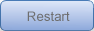
<style>
.page{position:relative;width:94px;height:31px}
.page>*{position:absolute;margin:0}
.t1{font:13.3px "ArialMT";color:#6e6e6e}
</style>
<div class="page">
<p class="t1" style="left:27px;top:11px;width:43px;height:10px">Restart</p>
</div>
